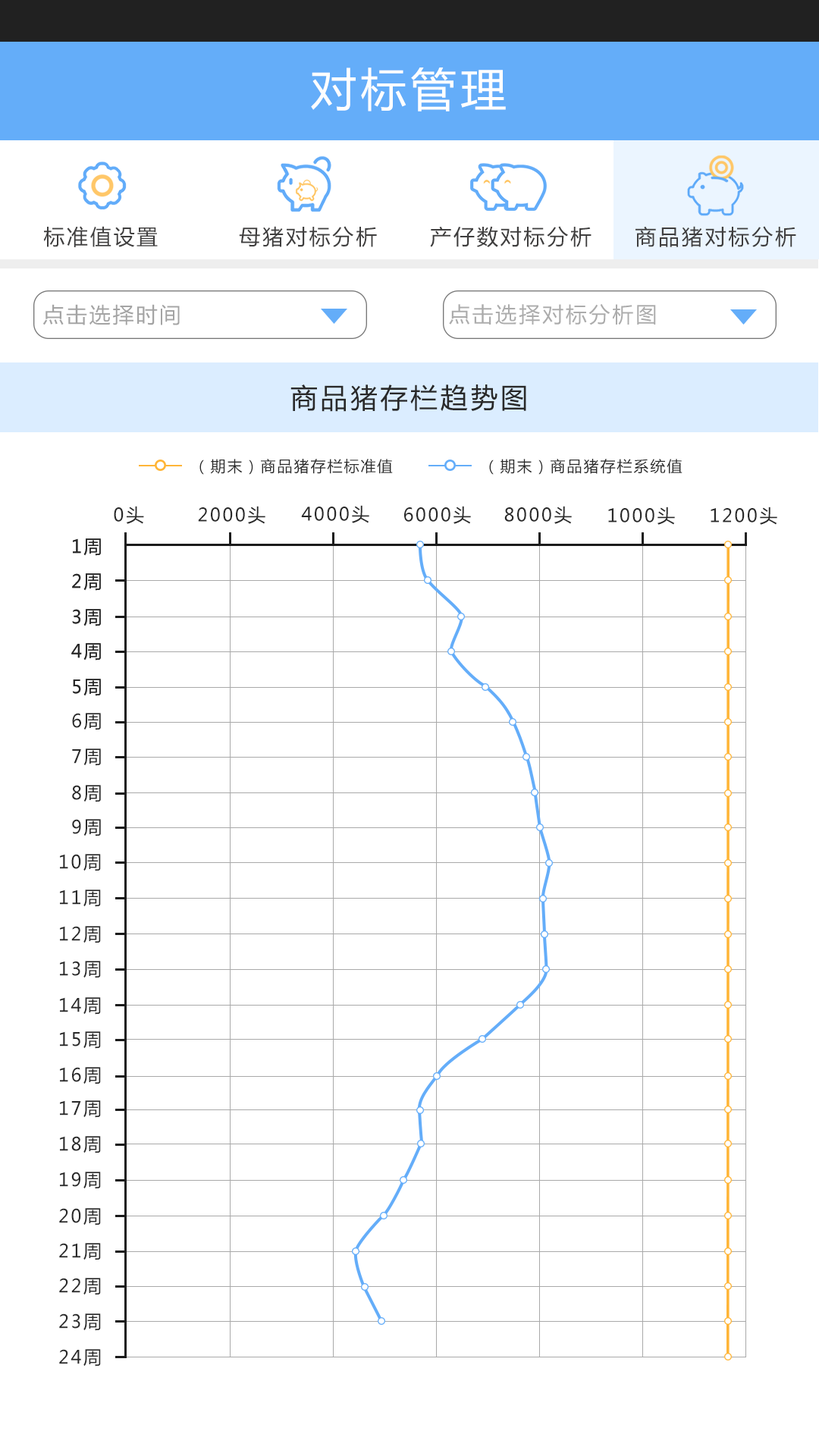
<style>
.page{position:relative;width:819px;height:1456px;background:#ffffff}
.page>*{position:absolute;margin:0}
.t1{font:45.5px "MicrosoftYaHei";letter-spacing:0.1em;color:#fefefe}
.t2{font:21.2px "MicrosoftYaHei";letter-spacing:0.1em;color:#3f3e3e}
.t3{font:21.2px "MicrosoftYaHei";letter-spacing:0.1em;color:#a4a4a4}
.t4{font:21.2px "MicrosoftYaHei";letter-spacing:0.1em;color:#acacac}
.t5{font:27.3px "MicrosoftYaHei";letter-spacing:0.1em;color:#292929}
.t6{font:15.2px "MicrosoftYaHei";letter-spacing:0.1em;color:#292929}
.t7{font:18.2px "MicrosoftYaHei";letter-spacing:0.1em;color:#292929}
</style>
<div class="page">
<p class="t1" style="left:311px;top:67px;width:195px;height:44px">对标管理</p>
<p class="t2" style="left:43px;top:226px;width:115px;height:21px">标准值设置</p>
<p class="t2" style="left:239px;top:226px;width:138px;height:21px">母猪对标分析</p>
<p class="t2" style="left:430px;top:226px;width:161px;height:21px">产仔数对标分析</p>
<p class="t2" style="left:635px;top:226px;width:161px;height:21px">商品猪对标分析</p>
<p class="t3" style="left:42px;top:304px;width:138px;height:21px">点击选择时间</p>
<p class="t4" style="left:449px;top:304px;width:207px;height:21px">点击选择对标分析图</p>
<p class="t5" style="left:290px;top:384px;width:236px;height:28px">商品猪存栏趋势图</p>
<p class="t6" style="left:199px;top:459px;width:194px;height:16px">（期末）商品猪存栏标准值</p>
<p class="t6" style="left:489px;top:459px;width:193px;height:16px">（期末）商品猪存栏系统值</p>
<p class="t7" style="left:114px;top:506px;width:30px;height:18px">0头</p>
<p class="t7" style="left:198px;top:506px;width:67px;height:18px">2000头</p>
<p class="t7" style="left:301px;top:505px;width:68px;height:18px">4000头</p>
<p class="t7" style="left:404px;top:506px;width:67px;height:18px">6000头</p>
<p class="t7" style="left:504px;top:506px;width:68px;height:18px">8000头</p>
<p class="t7" style="left:608px;top:507px;width:67px;height:18px">1000头</p>
<p class="t7" style="left:711px;top:507px;width:66px;height:18px">1200头</p>
<p class="t7" style="left:73px;top:538px;width:28px;height:18px">1周</p>
<p class="t7" style="left:73px;top:538px;width:28px;height:18px">1周</p>
<p class="t7" style="left:72px;top:573px;width:29px;height:18px">2周</p>
<p class="t7" style="left:72px;top:573px;width:29px;height:18px">2周</p>
<p class="t7" style="left:72px;top:609px;width:29px;height:17px">3周</p>
<p class="t7" style="left:72px;top:609px;width:29px;height:17px">3周</p>
<p class="t7" style="left:71px;top:643px;width:30px;height:17px">4周</p>
<p class="t7" style="left:71px;top:643px;width:30px;height:17px">4周</p>
<p class="t7" style="left:73px;top:679px;width:28px;height:17px">5周</p>
<p class="t7" style="left:73px;top:679px;width:28px;height:17px">5周</p>
<p class="t7" style="left:72px;top:713px;width:29px;height:17px">6周</p>
<p class="t7" style="left:72px;top:748px;width:29px;height:18px">7周</p>
<p class="t7" style="left:72px;top:785px;width:29px;height:17px">8周</p>
<p class="t7" style="left:72px;top:819px;width:29px;height:17px">9周</p>
<p class="t7" style="left:60px;top:854px;width:41px;height:17px">10周</p>
<p class="t7" style="left:60px;top:890px;width:41px;height:17px">11周</p>
<p class="t7" style="left:60px;top:926px;width:41px;height:17px">12周</p>
<p class="t7" style="left:60px;top:961px;width:41px;height:17px">13周</p>
<p class="t7" style="left:60px;top:997px;width:41px;height:18px">14周</p>
<p class="t7" style="left:60px;top:1031px;width:41px;height:18px">15周</p>
<p class="t7" style="left:60px;top:1067px;width:41px;height:17px">16周</p>
<p class="t7" style="left:60px;top:1100px;width:41px;height:18px">17周</p>
<p class="t7" style="left:60px;top:1136px;width:41px;height:17px">18周</p>
<p class="t7" style="left:60px;top:1172px;width:41px;height:17px">19周</p>
<p class="t7" style="left:59px;top:1208px;width:42px;height:17px">20周</p>
<p class="t7" style="left:59px;top:1243px;width:42px;height:17px">21周</p>
<p class="t7" style="left:59px;top:1278px;width:42px;height:17px">22周</p>
<p class="t7" style="left:59px;top:1313px;width:42px;height:18px">23周</p>
<p class="t7" style="left:59px;top:1349px;width:42px;height:17px">24周</p>
</div>
